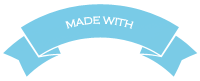
<style>
.page{position:relative;width:200px;height:81px;background:#ffffff}
.page>*{position:absolute;margin:0}
.t1{font:10.5px "CopperplateGothic-Light";letter-spacing:-0.025em;color:#ffffff}
</style>
<div class="page">
<p class="t1" style="left:65px;top:16px;width:69px;height:13px">MADE WITH</p>
</div>
